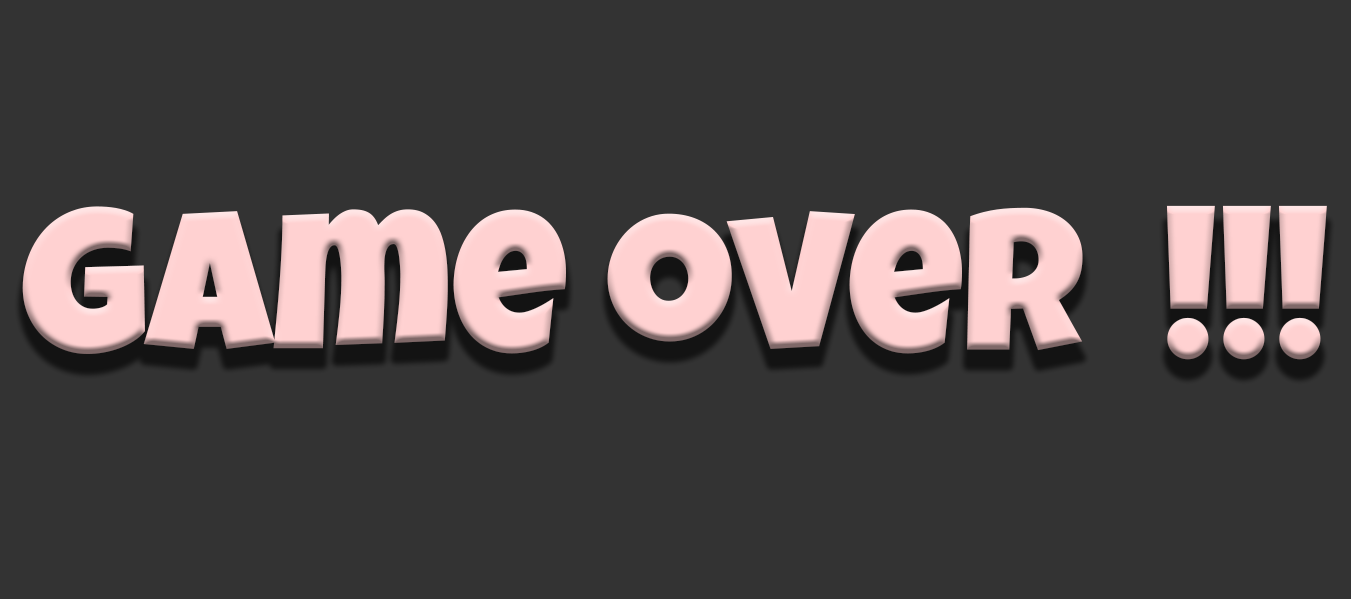
<style>
.page{position:relative;width:1351px;height:599px;background:#333333}
.page>*{position:absolute;margin:0}
.t1{font:200px "LuckiestGuy-Regular";color:#ffd1d1}
</style>
<div class="page">
<p class="t1" style="left:22px;top:205px;width:1305px;height:155px">Game over  !!!</p>
</div>
